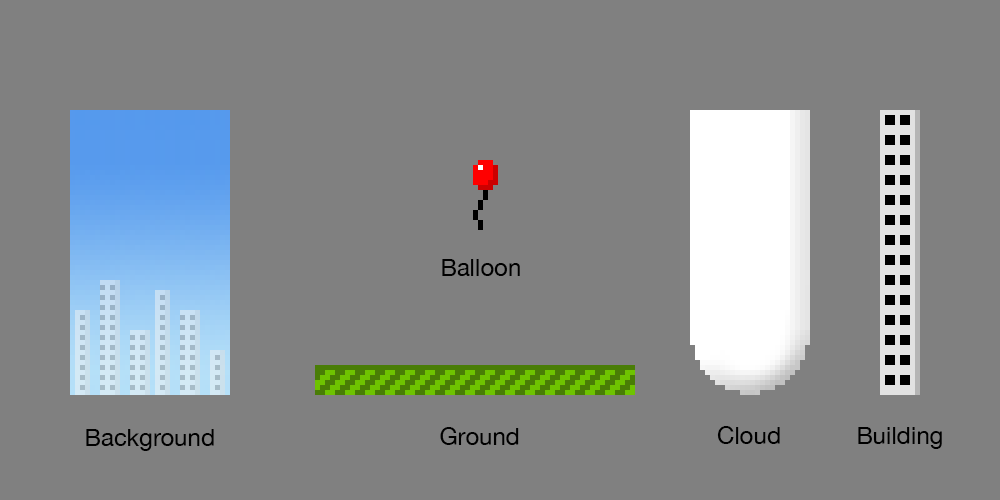
<style>
.page{position:relative;width:1000px;height:500px;background:#808080}
.page>*{position:absolute;margin:0}
.t1{font:12px "HelveticaNeue";color:#000000}
.t2{font:24px "HelveticaNeue";color:#000000}
</style>
<div class="page">
<p class="t1" style="left:442px;top:259px;width:78px;height:17px">Balloon</p>
<p class="t2" style="left:86px;top:429px;width:128px;height:22px">Background</p>
<p class="t1" style="left:440px;top:427px;width:79px;height:18px">Ground</p>
<p class="t1" style="left:717px;top:426px;width:63px;height:18px">Cloud</p>
<p class="t1" style="left:858px;top:427px;width:84px;height:22px">Building</p>
</div>
